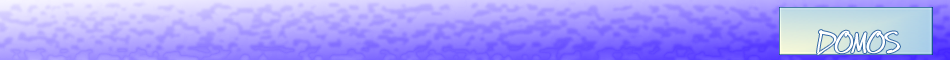
<style>
.page{position:relative;width:950px;height:60px}
.page>*{position:absolute;margin:0}
.t1{font:40px "EspecialKay";letter-spacing:-0.005em;color:#ffffff;scale:0.95 1}
</style>
<div class="page">
<p class="t1" style="left:817px;top:30px;width:83px;height:25px">DOMOS</p>
</div>
